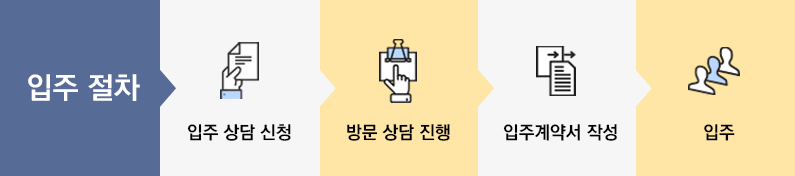
<style>
.page{position:relative;width:795px;height:176px;background:#f6f6f6}
.page>*{position:absolute;margin:0}
.t1{font:30px "KoPubDotumBold";color:#ffffff}
.t2{font:18px "KoPubDotumBold";color:#000000}
</style>
<div class="page">
<p class="t1" style="left:28px;top:74px;width:112px;height:27px">입주 절차</p>
<p class="t2" style="left:187px;top:124px;width:104px;height:17px">입주 상담 신청</p>
<p class="t2" style="left:347px;top:124px;width:103px;height:17px">방문 상담 진행</p>
<p class="t2" style="left:503px;top:124px;width:114px;height:17px">입주계약서 작성</p>
<p class="t2" style="left:704px;top:124px;width:31px;height:17px">입주</p>
</div>
